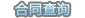
<style>
.page{position:relative;width:85px;height:18px;background:#ffffff}
.page>*{position:absolute;margin:0}
.t1{font:13px "MicrosoftYaHei";letter-spacing:0.04em;font-weight:bold}
</style>
<div class="page">
<p class="t1" style="left:15px;top:2px;width:55px;height:14px">合同查询</p>
</div>
